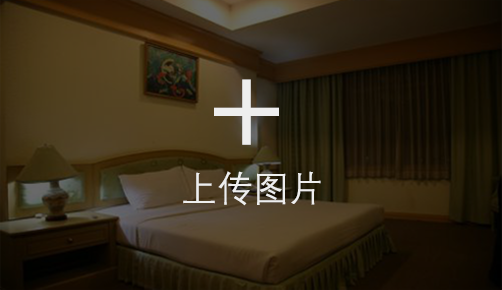
<style>
.page{position:relative;width:502px;height:290px}
.page>*{position:absolute;margin:0}
.t1{font:150px "STLiti";letter-spacing:0.2em;color:#eeeeee}
.t2{font:36px "FZDX--GB1-4";color:#eeeeee}
</style>
<div class="page">
<p class="t1" style="left:214px;top:79px;width:65px;height:66px">+</p>
<p class="t2" style="left:183px;top:171px;width:138px;height:35px">上传图片</p>
</div>
